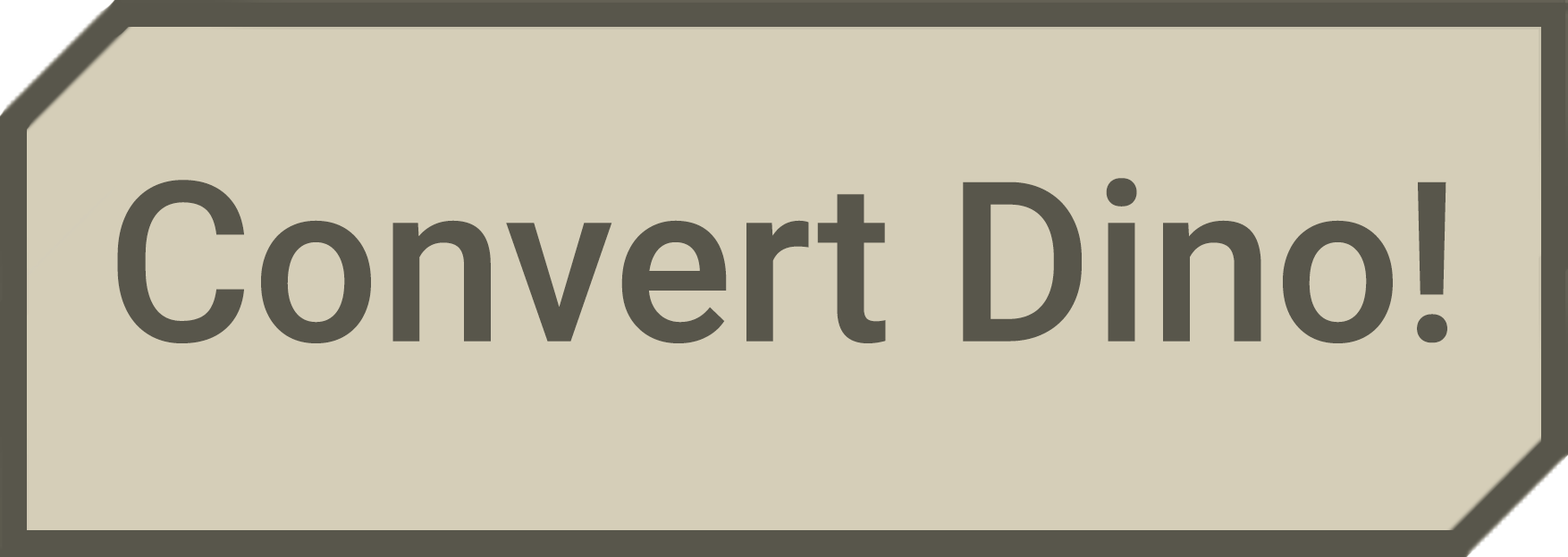
<style>
.page{position:relative;width:1568px;height:557px;background:#d5ceb8}
.page>*{position:absolute;margin:0}
.t1{font:223.5px "Roboto-Medium";color:#58564b}
</style>
<div class="page">
<p class="t1" style="left:117px;top:178px;width:1330px;height:165px">Convert Dino!</p>
</div>
